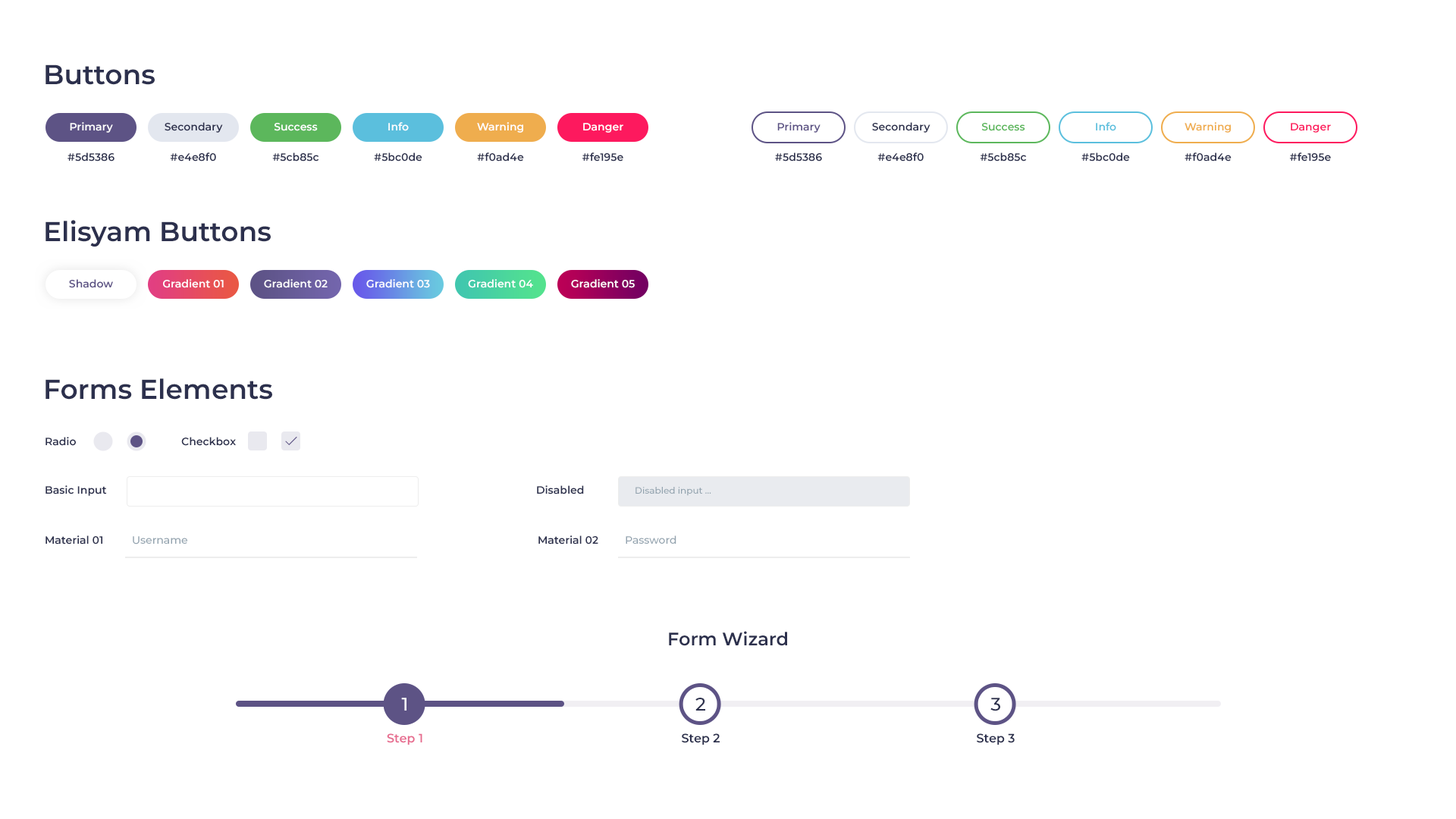
<style>
.page{position:relative;width:1456px;height:819px;background:#ffffff}
.page>*{position:absolute;margin:0}
.t1{font:27.3px "Montserrat-SemiBold";color:#2c304d}
.t2{font:10.6px "Montserrat-SemiBold";color:#ffffff}
.t3{font:10.6px "Montserrat-SemiBold";color:#2c304d}
.t4{font:10.6px "Montserrat-SemiBold";color:#5d5386}
.t5{font:10.6px "Montserrat-SemiBold";color:#5cb85c}
.t6{font:10.6px "Montserrat-SemiBold";color:#5bc0de}
.t7{font:10.6px "Montserrat-SemiBold";color:#f0ad4e}
.t8{font:10.6px "Montserrat-SemiBold";color:#fe195e}
.t9{font:9.1px "Montserrat-Medium";color:#94a4b0}
.t10{font:10.6px "Montserrat-Medium";color:#94a4b0}
.t11{font:18.2px "Montserrat-SemiBold";color:#2c304d}
.t12{font:18.2px "Montserrat-Medium";color:#ffffff}
.t13{font:18.2px "Montserrat-Medium";color:#2c304d}
.t14{font:12.1px "Montserrat-SemiBold";color:#e76c90}
.t15{font:12.1px "Montserrat-SemiBold";color:#2c304d}
</style>
<div class="page">
<p class="t1" style="left:45px;top:64px;width:110px;height:21px">Buttons</p>
<p class="t2" style="left:70px;top:122px;width:43px;height:11px">Primary</p>
<p class="t3" style="left:165px;top:122px;width:58px;height:11px">Secondary</p>
<p class="t2" style="left:274px;top:123px;width:44px;height:8px">Success</p>
<p class="t2" style="left:388px;top:122px;width:21px;height:9px">Info</p>
<p class="t2" style="left:477px;top:122px;width:46px;height:11px">Warning</p>
<p class="t2" style="left:583px;top:123px;width:40px;height:10px">Danger</p>
<p class="t4" style="left:777px;top:122px;width:44px;height:11px">Primary</p>
<p class="t3" style="left:872px;top:122px;width:58px;height:11px">Secondary</p>
<p class="t5" style="left:981px;top:123px;width:44px;height:8px">Success</p>
<p class="t6" style="left:1096px;top:122px;width:20px;height:9px">Info</p>
<p class="t7" style="left:1185px;top:122px;width:46px;height:11px">Warning</p>
<p class="t8" style="left:1291px;top:123px;width:40px;height:10px">Danger</p>
<p class="t3" style="left:67px;top:152px;width:48px;height:10px">#5d5386</p>
<p class="t3" style="left:170px;top:152px;width:46px;height:10px">#e4e8f0</p>
<p class="t3" style="left:272px;top:152px;width:47px;height:10px">#5cb85c</p>
<p class="t3" style="left:374px;top:152px;width:48px;height:10px">#5bc0de</p>
<p class="t3" style="left:477px;top:152px;width:47px;height:10px">#f0ad4e</p>
<p class="t3" style="left:582px;top:152px;width:41px;height:10px">#fe195e</p>
<p class="t3" style="left:775px;top:152px;width:47px;height:10px">#5d5386</p>
<p class="t3" style="left:877px;top:152px;width:47px;height:10px">#e4e8f0</p>
<p class="t3" style="left:980px;top:152px;width:47px;height:10px">#5cb85c</p>
<p class="t3" style="left:1081px;top:152px;width:49px;height:10px">#5bc0de</p>
<p class="t3" style="left:1185px;top:152px;width:47px;height:10px">#f0ad4e</p>
<p class="t3" style="left:1290px;top:152px;width:41px;height:10px">#fe195e</p>
<p class="t1" style="left:45px;top:220px;width:226px;height:27px">Elisyam Buttons</p>
<p class="t4" style="left:69px;top:279px;width:44px;height:9px">Shadow</p>
<p class="t2" style="left:163px;top:279px;width:61px;height:9px">Gradient 01</p>
<p class="t2" style="left:264px;top:279px;width:64px;height:9px">Gradient 02</p>
<p class="t2" style="left:366px;top:279px;width:64px;height:9px">Gradient 03</p>
<p class="t2" style="left:468px;top:279px;width:65px;height:9px">Gradient 04</p>
<p class="t2" style="left:571px;top:279px;width:64px;height:9px">Gradient 05</p>
<p class="t1" style="left:45px;top:378px;width:227px;height:22px">Forms Elements</p>
<p class="t3" style="left:45px;top:437px;width:31px;height:9px">Radio</p>
<p class="t3" style="left:181px;top:437px;width:55px;height:9px">Checkbox</p>
<p class="t3" style="left:45px;top:485px;width:62px;height:11px">Basic Input</p>
<p class="t3" style="left:537px;top:485px;width:47px;height:9px">Disabled</p>
<p class="t9" style="left:635px;top:487px;width:76px;height:9px">Disabled input ...</p>
<p class="t3" style="left:45px;top:535px;width:57px;height:9px">Material 01</p>
<p class="t10" style="left:133px;top:536px;width:54px;height:8px">Username</p>
<p class="t3" style="left:538px;top:535px;width:60px;height:9px">Material 02</p>
<p class="t10" style="left:626px;top:535px;width:50px;height:9px">Password</p>
<p class="t11" style="left:669px;top:631px;width:118px;height:15px">Form Wizard</p>
<p class="t12" style="left:401px;top:698px;width:5px;height:13px">1</p>
<p class="t13" style="left:695px;top:698px;width:10px;height:13px">2</p>
<p class="t13" style="left:990px;top:698px;width:10px;height:13px">3</p>
<p class="t14" style="left:387px;top:733px;width:35px;height:12px">Step 1</p>
<p class="t15" style="left:682px;top:733px;width:38px;height:12px">Step 2</p>
<p class="t15" style="left:977px;top:733px;width:38px;height:12px">Step 3</p>
</div>
